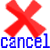
<style>
.page{position:relative;width:50px;height:50px;background:#ffffff}
.page>*{position:absolute;margin:0}
.t1{font:23.2px "WST_Engl";color:#0d01ff;scale:0.47 1}
</style>
<div class="page">
<p class="t1" style="left:0px;top:33px;width:50px;height:15px">cancel</p>
</div>
